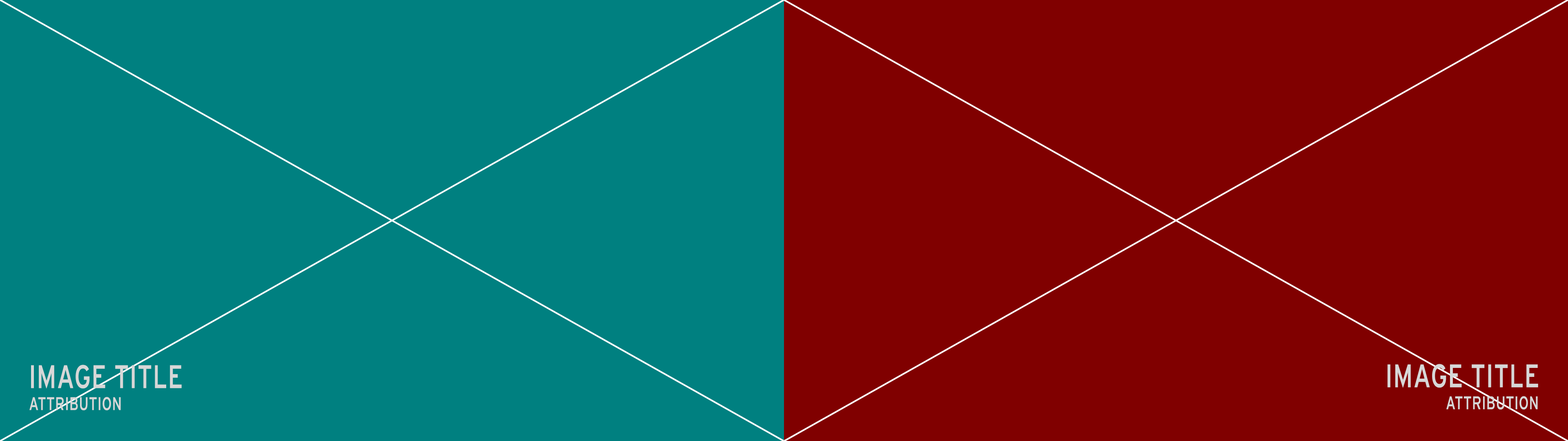
<style>
.page{position:relative;width:1568px;height:441px;background:#800000}
.page>*{position:absolute;margin:0}
.t1{font:32.3px "Interstate-Regular";color:#d7d7d7;text-transform:uppercase;font-weight:bold;scale:0.75 1}
.t2{font:18.2px "Interstate-Regular";color:#d7d7d7;text-transform:uppercase;font-weight:bold;scale:0.75 1}
</style>
<div class="page">
<p class="t1" style="left:31px;top:365px;width:151px;height:24px">IMAGE TITLE</p>
<p class="t1" style="left:1388px;top:364px;width:150px;height:24px">IMAGE TITLE</p>
<p class="t2" style="left:29px;top:397px;width:92px;height:13px">attribution</p>
<p class="t2" style="left:1446px;top:396px;width:92px;height:14px">attribution</p>
</div>
